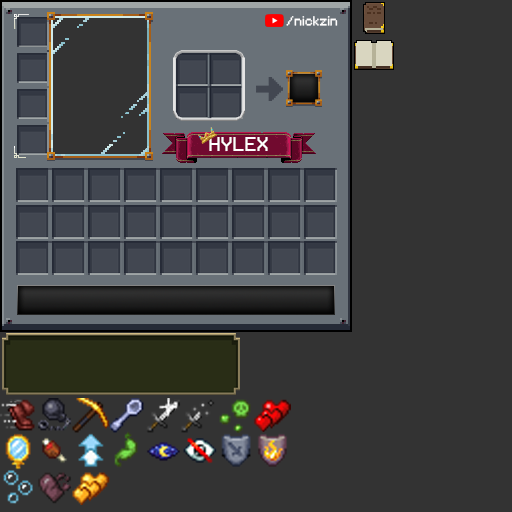
<style>
.page{position:relative;width:512px;height:512px;background:#333333}
.page>*{position:absolute;margin:0}
.t1{font:10.6px "Minecraftia-Regular";color:#ffffff}
.t2{font:24px "ProFontWindows";color:#ffffff}
</style>
<div class="page">
<p class="t1" style="left:286px;top:16px;width:52px;height:10px">/nickzin</p>
<p class="t2" style="left:209px;top:137px;width:59px;height:14px">HYLEX</p>
</div>
